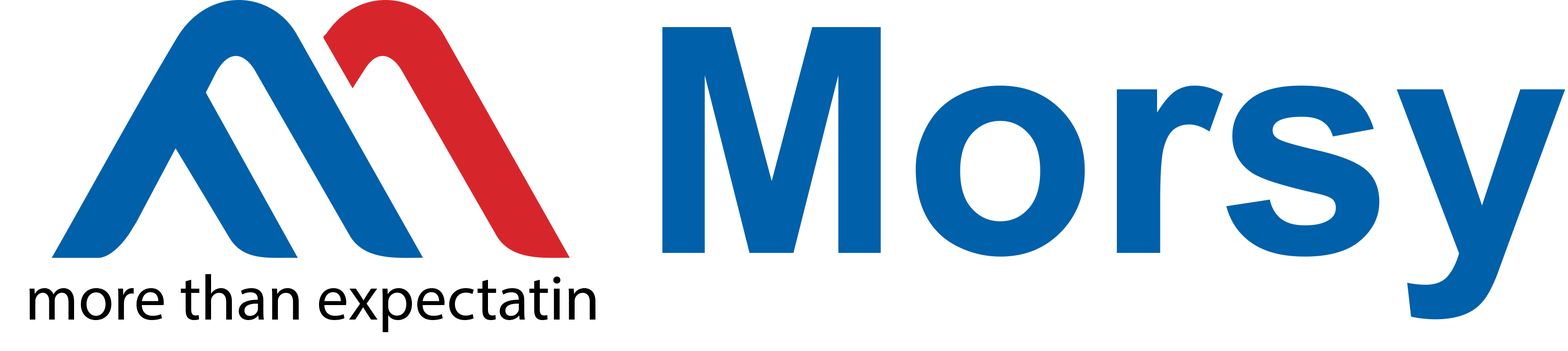
<style>
.page{position:relative;width:1568px;height:351px;background:#ffffff}
.page>*{position:absolute;margin:0}
.t1{font:64.1px "MyriadPro-Regular";color:#000000}
</style>
<div class="page">
<p class="t1" style="left:30px;top:274px;width:565px;height:59px">more than expectatin</p>
</div>
